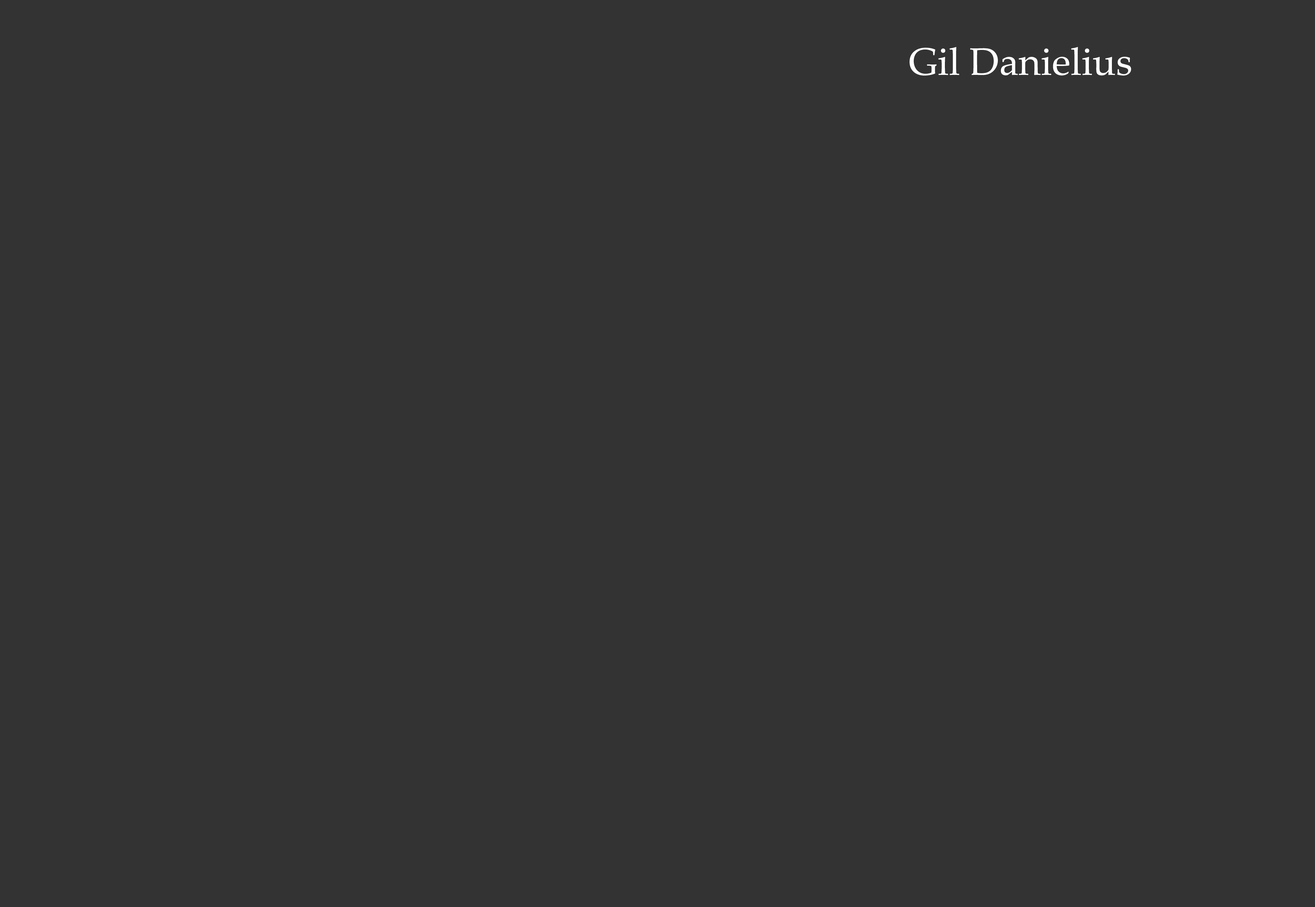
<style>
.page{position:relative;width:1315px;height:907px;background:#333333}
.page>*{position:absolute;margin:0}
.t1{font:38.4px "PalatinoLinotype-Roman";color:#ffffff}
</style>
<div class="page">
<p class="t1" style="left:910px;top:47px;width:221px;height:29px">Gil Danielius</p>
</div>
